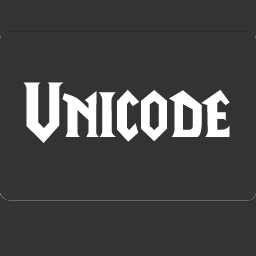
<style>
.page{position:relative;width:256px;height:256px;background:#333333}
.page>*{position:absolute;margin:0}
.t1{font:78px "LifeCraft";color:#ffffff}
</style>
<div class="page">
<p class="t1" style="left:23px;top:82px;width:207px;height:61px">Unicode</p>
</div>
